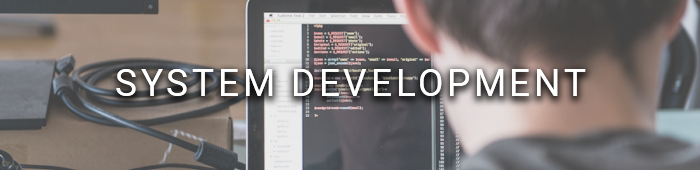
<style>
.page{position:relative;width:700px;height:170px}
.page>*{position:absolute;margin:0}
.t1{font:37px "Roboto-Regular";letter-spacing:0.1em;color:#ffffff}
</style>
<div class="page">
<p class="t1" style="left:116px;top:69px;width:470px;height:27px">SYSTEM DEVELOPMENT</p>
</div>
